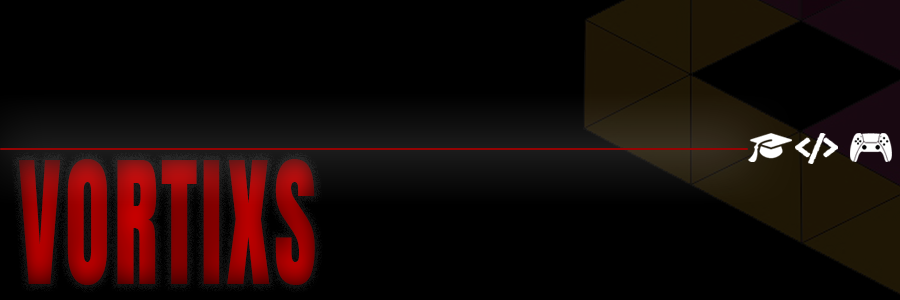
<style>
.page{position:relative;width:900px;height:300px;background:#000000}
.page>*{position:absolute;margin:0}
.t1{font:144.2px "Anton-Regular";letter-spacing:0.04em;scale:0.64 1}
</style>
<div class="page">
<p class="t1" style="left:19px;top:159px;width:296px;height:126px">VORTIXS</p>
</div>
